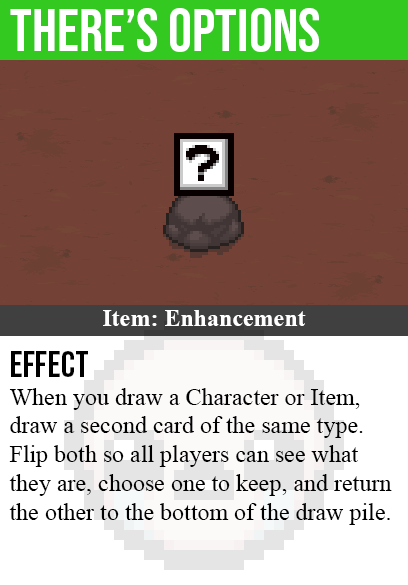
<style>
.page{position:relative;width:408px;height:585px;background:#734136}
.page>*{position:absolute;margin:0}
.t1{font:60px "BebasNeue-Regular";color:#ffffff}
.t2{font:24px "TimesNewRomanPS-BoldMT";color:#ffffff}
.t3{font:36px "BebasNeue-Regular";color:#000000}
.t4{font:24px "TimesNewRomanPSMT";color:#000000}
</style>
<div class="page">
<p class="t1" style="left:10px;top:8px;width:309px;height:44px">there’s options</p>
<p class="t2" style="left:103px;top:310px;width:203px;height:16px">Item: Enhancement</p>
<p class="t3" style="left:11px;top:351px;width:77px;height:26px">effect</p>
<p class="t4" style="left:9px;top:388px;width:383px;height:137px">When you draw a Character or Item,<br>draw a second card of the same type.<br>Flip both so all players can see what<br>they are, choose one to keep, and return<br>the other to the bottom of the draw pile.</p>
</div>
